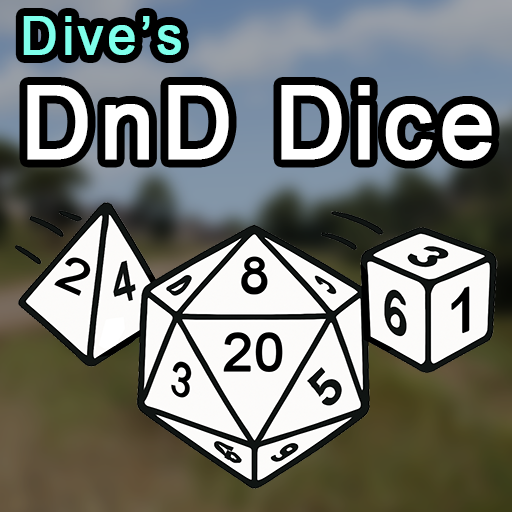
<style>
.page{position:relative;width:512px;height:512px}
.page>*{position:absolute;margin:0}
.t1{font:100.7px/104.4px "ArialMT";letter-spacing:0.06em;color:#ffffff;font-weight:bold;scale:0.96 1}
.t2{font:53px/104.4px "ArialMT";letter-spacing:0.06em;color:#7effeb;font-weight:bold;scale:0.96 1}
</style>
<div class="page">
<p class="t1" style="left:23px;top:16px;width:469px;height:145px"><span class="t2">Dive’s<br></span>DnD Dice</p>
</div>
